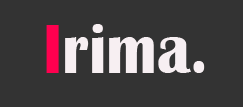
<style>
.page{position:relative;width:243px;height:107px;background:#333333}
.page>*{position:absolute;margin:0}
.t1{font:72px "BritannicBold";color:#f7eff2;scale:0.86 1}
.t2{font:72px "BritannicBold";color:#ff004f;scale:0.86 1}
</style>
<div class="page">
<p class="t1" style="left:46px;top:24px;width:159px;height:49px"><span class="t2">I</span>rima.</p>
</div>
